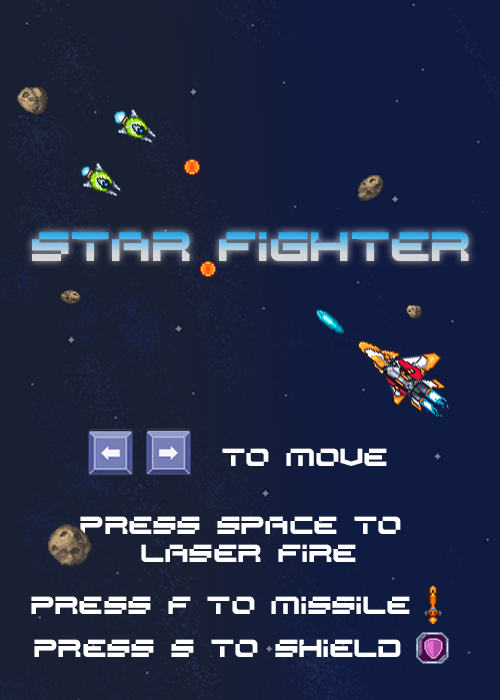
<style>
.page{position:relative;width:500px;height:700px;background:#101b41}
.page>*{position:absolute;margin:0}
.t1{font:24px "SPACERACER";color:#ffffff}
</style>
<div class="page">
<p class="t1" style="left:222px;top:448px;width:165px;height:18px">to move</p>
<p class="t1" style="left:80px;top:516px;width:321px;height:46px;text-align:center">press space to<br> laser fire</p>
<p class="t1" style="left:31px;top:596px;width:379px;height:18px">press f to missile</p>
<p class="t1" style="left:34px;top:639px;width:367px;height:18px">PRESS S to shield</p>
</div>
